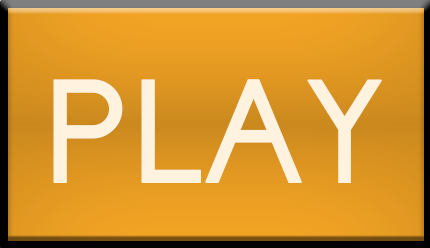
<style>
.page{position:relative;width:430px;height:248px}
.page>*{position:absolute;margin:0}
.t1{font:147.6px "Coves-Bold";color:#fff3e0}
</style>
<div class="page">
<p class="t1" style="left:53px;top:79px;width:329px;height:104px">PLAY</p>
</div>
